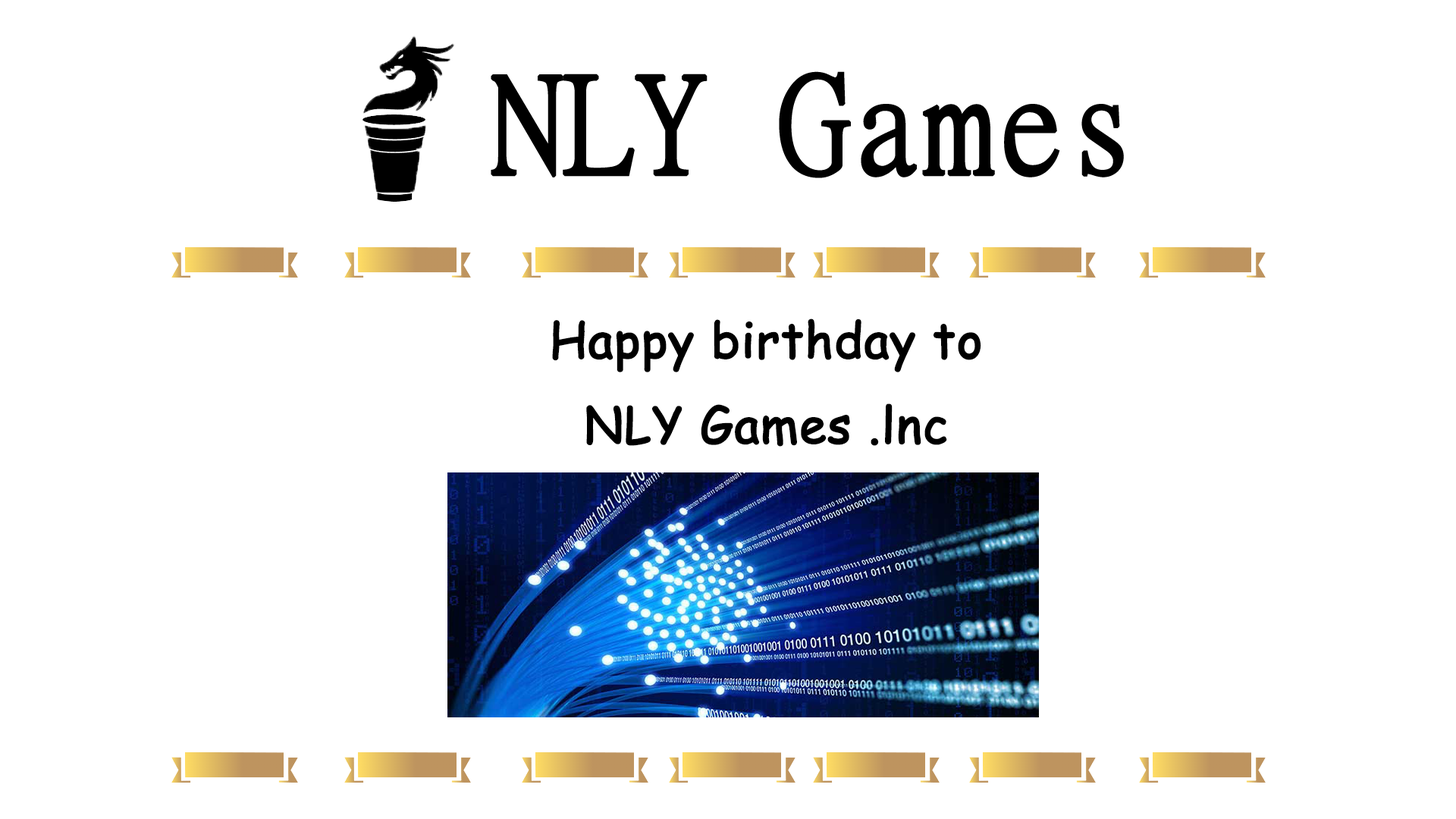
<style>
.page{position:relative;width:1456px;height:819px;background:#ffffff}
.page>*{position:absolute;margin:0}
.t1{font:48.5px "ComicSansMS";color:#000000;font-weight:bold}
</style>
<div class="page">
<p class="t1" style="left:552px;top:318px;width:429px;height:129px;text-align:center">Happy birthday to<br>NLY Games .lnc</p>
</div>
